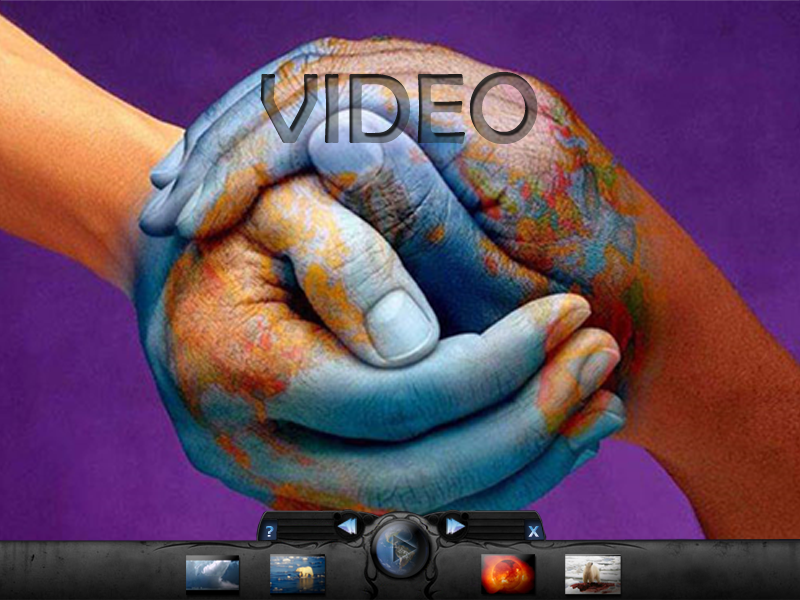
<style>
.page{position:relative;width:800px;height:600px}
.page>*{position:absolute;margin:0}
.t1{font:100.7px "BerlinSansFB-Reg"}
</style>
<div class="page">
<p class="t1" style="left:260px;top:72px;width:278px;height:72px">VIDEO</p>
</div>
